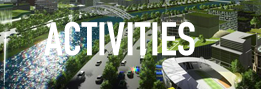
<style>
.page{position:relative;width:261px;height:89px}
.page>*{position:absolute;margin:0}
.t1{font:46.4px "DINCondensed-Bold";color:#ffffff}
</style>
<div class="page">
<p class="t1" style="left:44px;top:21px;width:151px;height:35px">ACTIVITIES</p>
</div>
